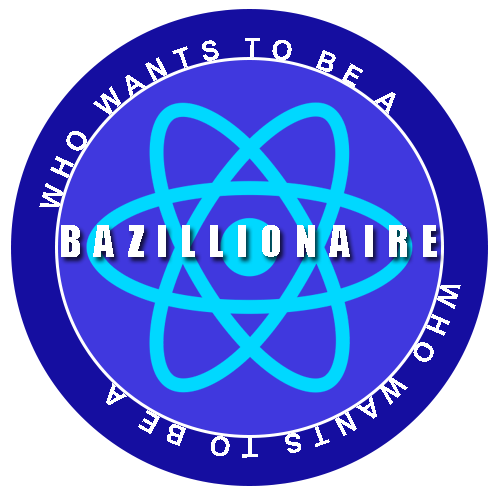
<style>
.page{position:relative;width:500px;height:500px;background:#ffffff}
.page>*{position:absolute;margin:0}
.t1{font:27px/24px "Arial-BoldMT";letter-spacing:0.3em;color:#ffffff}
.t2{font:41px "Impact";letter-spacing:0.3em;color:#ffffff}
</style>
<div class="page">
<p class="t1" style="left:39px;top:38px;width:357px;height:169px">WHO WANTS TO BE A</p>
<p class="t2" style="left:61px;top:225px;width:376px;height:32px">BAZILLIONAIRE</p>
<p class="t1" style="left:106px;top:285px;width:355px;height:173px">WHO WANTS TO BE A</p>
</div>
